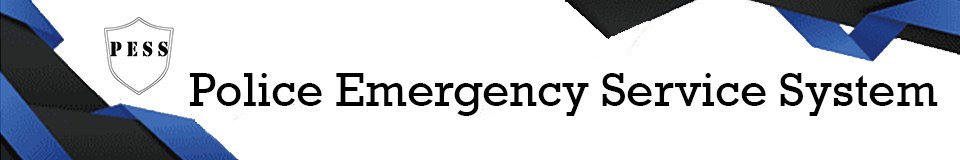
<style>
.page{position:relative;width:960px;height:160px;background:#ffffff}
.page>*{position:absolute;margin:0}
.t1{font:48px "Rockwell";color:#000000}
</style>
<div class="page">
<p class="t1" style="left:189px;top:73px;width:749px;height:43px">Police Emergency Service System</p>
</div>
